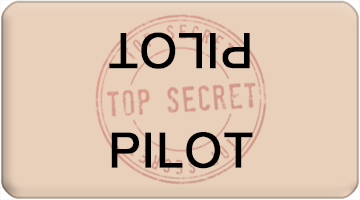
<style>
.page{position:relative;width:360px;height:200px;background:#e8d0bb}
.page>*{position:absolute;margin:0}
.t1{font:48px "ArialMT";color:#000000;font-weight:bold}
</style>
<div class="page">
<p class="t1" style="left:109px;top:32px;width:141px;height:37px;rotate:180deg">PILOT</p>
<p class="t1" style="left:111px;top:132px;width:142px;height:37px">PILOT</p>
</div>
